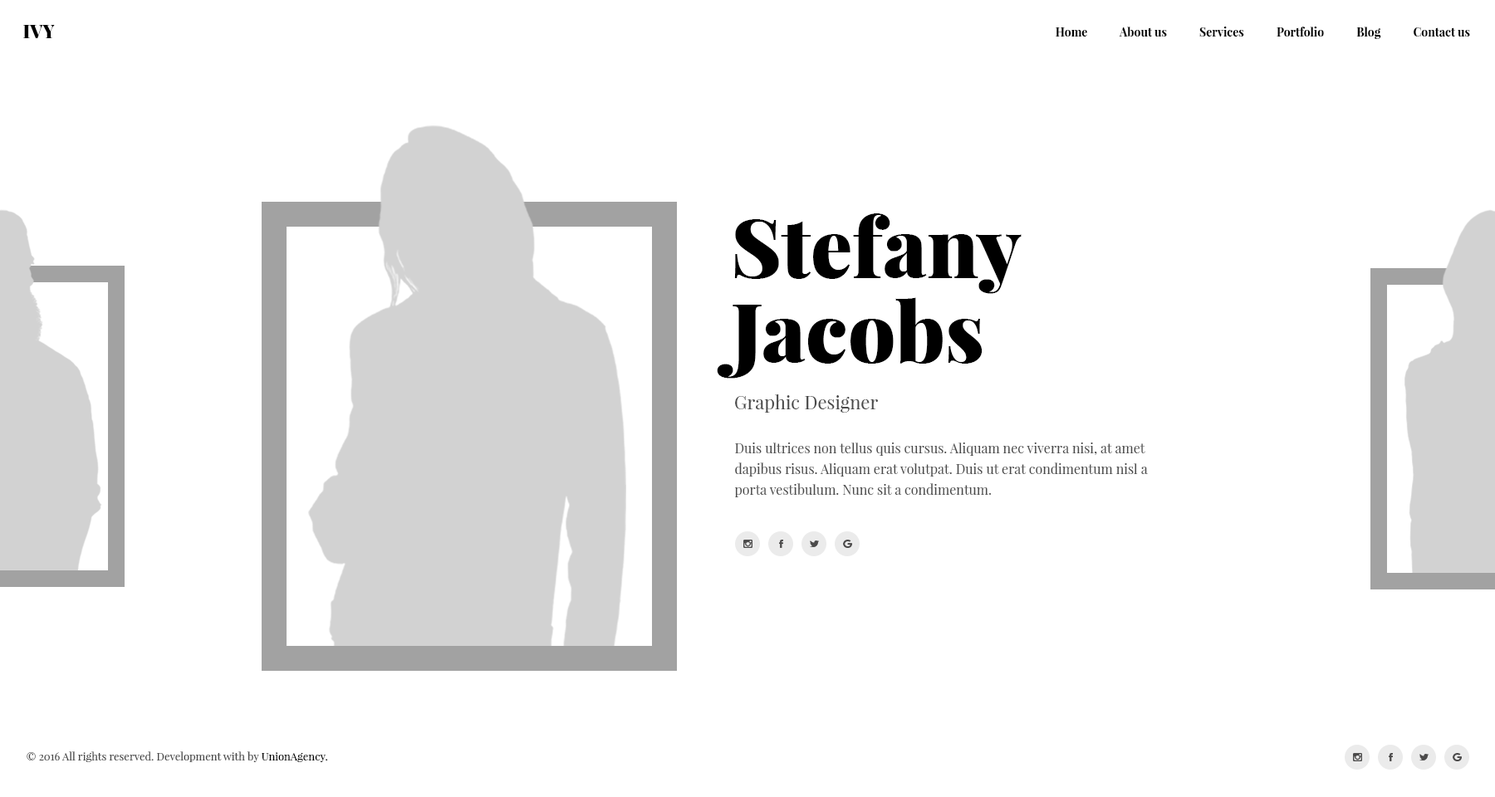
<style>
.page{position:relative;width:1495px;height:797px;background:#ffffff}
.page>*{position:absolute;margin:0}
.t1{font:18.3px "PlayfairDisplay-Black";color:#000000}
.t2{font:11.6px "PlayfairDisplay-Bold";color:#000000}
.t3{font:83.1px/84.7px "PlayfairDisplay-Black";color:#000000}
.t4{font:18.3px "PlayfairDisplay-Regular";color:#494949}
.t5{font:13.3px/20.8px "PlayfairDisplay-Regular";color:#494949}
.t6{font:10.8px "PlayfairDisplay-Regular";color:#494949}
.t7{font:10.8px "PlayfairDisplay-Regular";color:#000000}
</style>
<div class="page">
<p class="t1" style="left:23px;top:25px;width:32px;height:13px">IVY</p>
<p class="t2" style="left:1056px;top:27px;width:414px;height:12px">Home            About us            Services            Portfolio            Blog            Contact us</p>
<p class="t3" style="left:717px;top:213px;width:305px;height:166px">Stefany <br>Jacobs</p>
<p class="t4" style="left:735px;top:395px;width:143px;height:18px">Graphic Designer</p>
<p class="t5" style="left:734px;top:443px;width:414px;height:55px">Duis ultrices non tellus quis cursus. Aliquam nec viverra nisi, at amet dapibus risus. Aliquam erat volutpat. Duis ut erat condimentum nisl a porta vestibulum. Nunc sit a condimentum.</p>
<p class="t6" style="left:27px;top:752px;width:301px;height:11px">© 2016 All rights reserved. Development with by <span class="t7">UnionAgency.</span></p>
</div>
